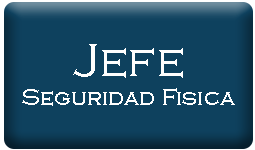
<style>
.page{position:relative;width:255px;height:150px;background:#0e415e}
.page>*{position:absolute;margin:0}
.t1{font:24px "CopperplateGothic-Light";color:#ffffff}
.t2{font:48px "CopperplateGothic-Light";color:#ffffff}
</style>
<div class="page">
<p class="t1" style="left:22px;top:44px;width:213px;height:62px;text-align:center"><span class="t2">Jefe</span><br>Seguridad Fisica</p>
</div>
